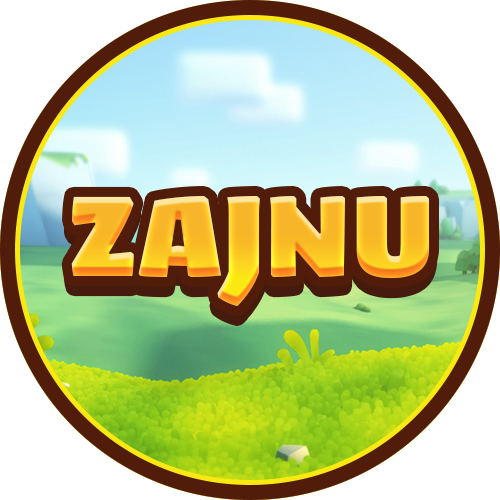
<style>
.page{position:relative;width:500px;height:500px;background:#ffffff}
.page>*{position:absolute;margin:0}
.t1{font:116.4px "AntithesisPro-Bold";letter-spacing:0.01em;text-transform:uppercase}
</style>
<div class="page">
<p class="t1" style="left:71px;top:196px;width:358px;height:110px">zajnu</p>
</div>
